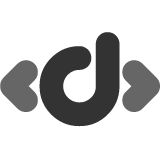
<style>
.page{position:relative;width:160px;height:160px;background:#ffffff}
.page>*{position:absolute;margin:0}
.t1{font:107.6px "TechniqueBRK";letter-spacing:-0.05em;color:#666666}
.t2{font:107.6px "TechniqueBRK";letter-spacing:-0.05em;color:#333333}
</style>
<div class="page">
<p class="t1" style="left:0px;top:32px;width:160px;height:95px">&lt;<span class="t2">d</span>&gt;</p>
</div>
